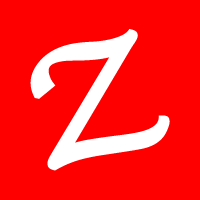
<style>
.page{position:relative;width:200px;height:200px;background:#ff0000}
.page>*{position:absolute;margin:0}
.t1{font:165.2px "Apple-Chancery";color:#ffffff;font-weight:bold;scale:1.41 1}
</style>
<div class="page">
<p class="t1" style="left:30px;top:29px;width:140px;height:142px;rotate:-14deg">Z</p>
</div>
